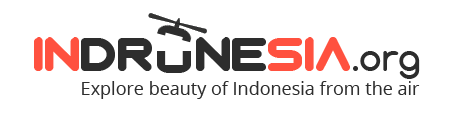
<style>
.page{position:relative;width:468px;height:121px;background:#ffffff}
.page>*{position:absolute;margin:0}
.t1{font:48px "Zian";color:#2d2d2d}
.t2{font:48px "Zian";color:#ff513f}
.t3{font:36px "Comfortaa-Bold";color:#2d2d2d}
.t4{font:18px "OpenSans";color:#2d2d2d}
</style>
<div class="page">
<p class="t1" style="left:34px;top:37px;width:386px;height:42px"><span class="t2">in</span>dr    ne<span class="t2">sia</span><span class="t3">.org</span></p>
<p class="t4" style="left:82px;top:81px;width:338px;height:18px">Explore beauty of Indonesia from the air</p>
</div>
